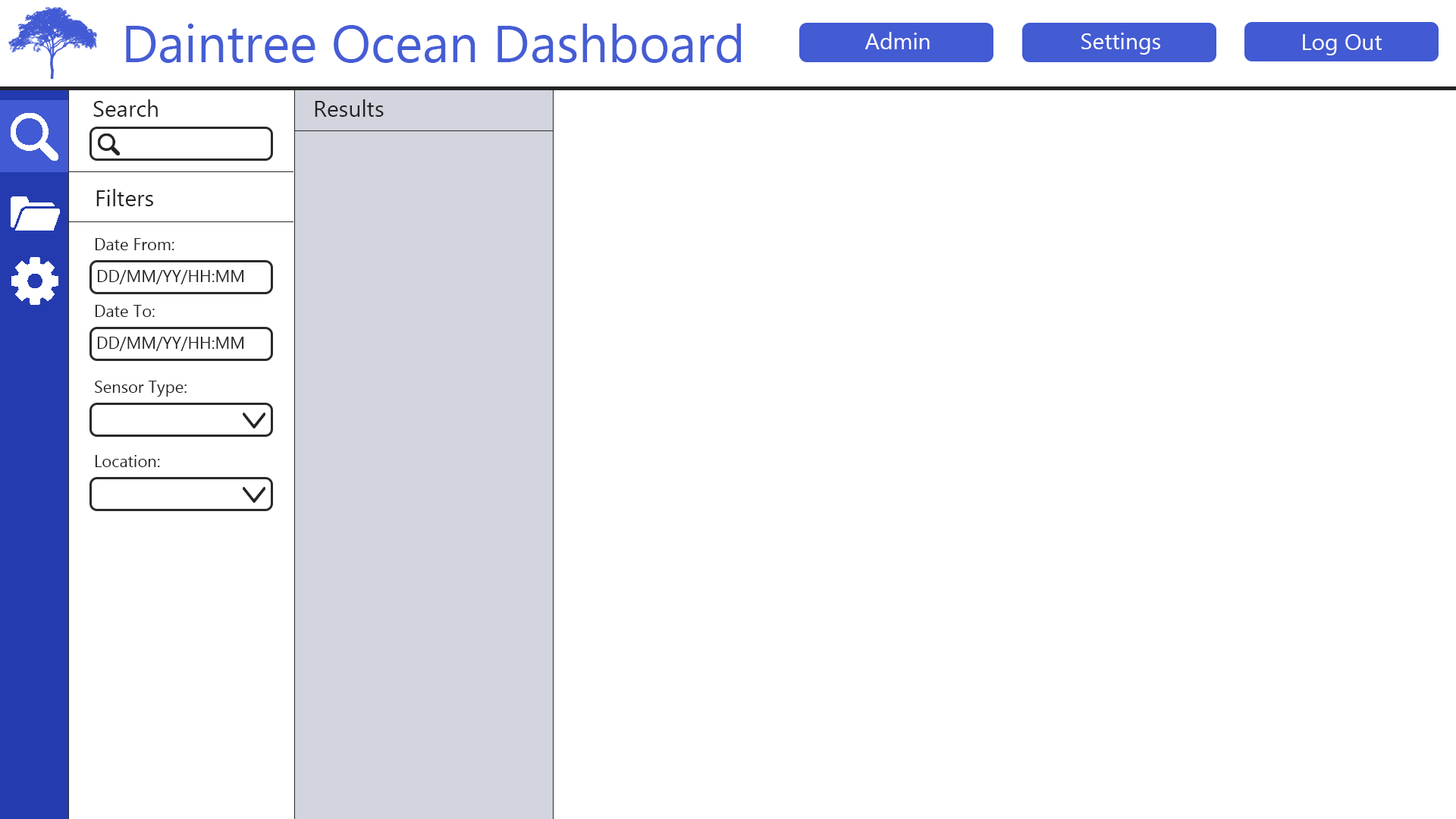
<style>
.page{position:relative;width:1456px;height:819px;background:#ffffff}
.page>*{position:absolute;margin:0}
.t1{font:52.3px "MyanmarText";color:#455dd4}
.t2{font:22.7px "MyanmarText";color:#ffffff}
.t3{font:22.7px "MyanmarText";color:#232323}
.t4{font:16.7px "MyanmarText";color:#232323}
</style>
<div class="page">
<p class="t1" style="left:126px;top:24px;width:615px;height:39px">Daintree Ocean Dashboard</p>
<p class="t2" style="left:864px;top:32px;width:66px;height:17px">Admin</p>
<p class="t2" style="left:1081px;top:33px;width:79px;height:22px">Settings</p>
<p class="t2" style="left:1303px;top:34px;width:79px;height:21px">Log Out</p>
<p class="t3" style="left:93px;top:99px;width:65px;height:18px">Search</p>
<p class="t3" style="left:315px;top:99px;width:69px;height:18px">Results</p>
<p class="t3" style="left:96px;top:189px;width:57px;height:17px">Filters</p>
<p class="t4" style="left:95px;top:238px;width:79px;height:12px">Date From:</p>
<p class="t4" style="left:97px;top:270px;width:147px;height:14px">DD/MM/YY/HH:MM</p>
<p class="t4" style="left:95px;top:305px;width:60px;height:12px">Date To:</p>
<p class="t4" style="left:97px;top:337px;width:147px;height:14px">DD/MM/YY/HH:MM</p>
<p class="t4" style="left:95px;top:381px;width:92px;height:16px">Sensor Type:</p>
<p class="t4" style="left:95px;top:455px;width:65px;height:12px">Location:</p>
</div>
